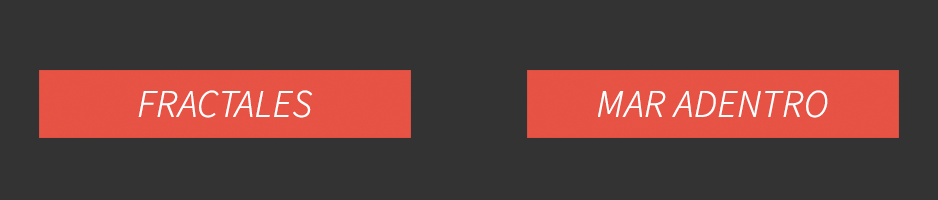
<style>
.page{position:relative;width:938px;height:200px;background:#333333}
.page>*{position:absolute;margin:0}
.t1{font:39px "SourceSansPro-LightIt";color:#ffffff;font-weight:bold}
</style>
<div class="page">
<p class="t1" style="left:138px;top:90px;width:175px;height:28px">FRACTALES</p>
<p class="t1" style="left:598px;top:90px;width:230px;height:28px">MAR ADENTRO</p>
</div>
